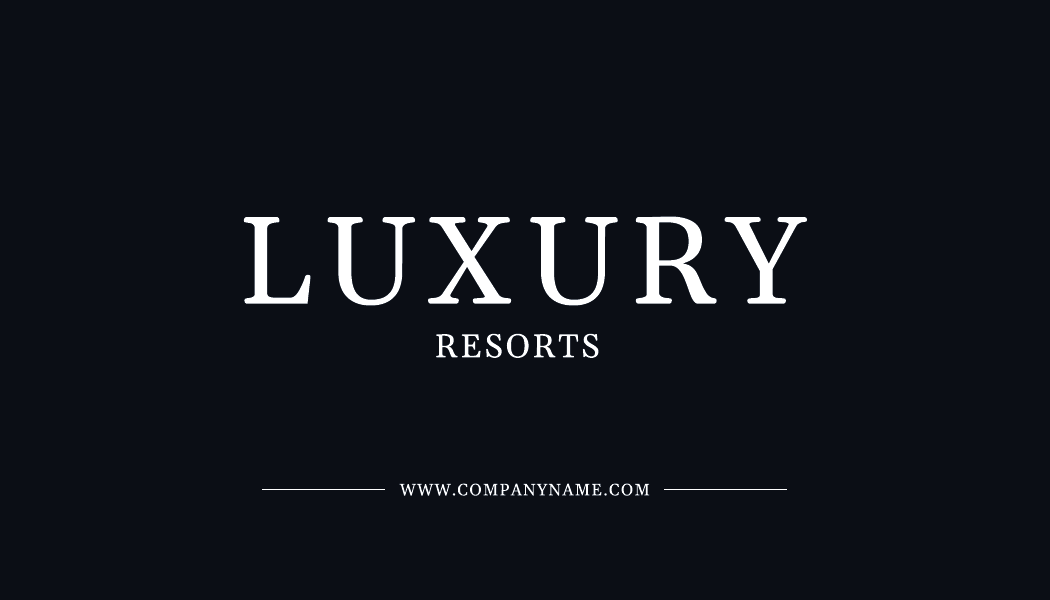
<style>
.page{position:relative;width:1050px;height:600px;background:#0b0e15}
.page>*{position:absolute;margin:0}
.t1{font:125px "Gelasio-Regular";letter-spacing:0.075em;color:#ffffff}
.t2{font:33.3px "Gelasio-Regular";letter-spacing:0.075em;color:#ffffff;text-transform:uppercase}
.t3{font:16.7px "Gelasio-Regular";letter-spacing:0.075em;color:#ffffff;text-transform:uppercase}
</style>
<div class="page">
<p class="t1" style="left:243px;top:216px;width:565px;height:90px">LUXURY</p>
<p class="t2" style="left:436px;top:333px;width:163px;height:25px">resortS</p>
<p class="t3" style="left:399px;top:483px;width:251px;height:13px">www.companyname.com</p>
</div>
